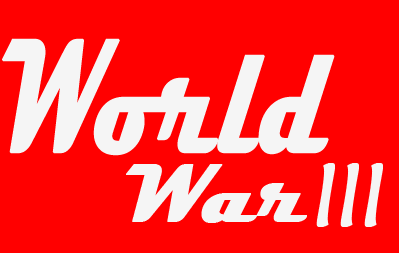
<style>
.page{position:relative;width:399px;height:253px;background:#ff0000}
.page>*{position:absolute;margin:0}
.t1{font:162.5px "Magneto-Bold";color:#f5f5f5;font-weight:bold;font-style:italic;scale:0.62 1}
.t2{font:83.3px "Magneto-Bold";color:#f5f5f5;font-weight:bold;font-style:italic}
.t3{font:90px "MaiandraGD-Regular";color:#f5f5f5;font-weight:bold;font-style:italic;scale:0.83 1}
</style>
<div class="page">
<p class="t1" style="left:2px;top:38px;width:333px;height:118px">World</p>
<p class="t2" style="left:126px;top:164px;width:181px;height:59px">War</p>
<p class="t3" style="left:316px;top:163px;width:67px;height:64px">III</p>
</div>
